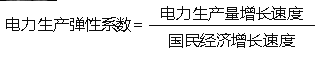
<style>
.page{position:relative;width:323px;height:57px;background:#ffffff}
.page>*{position:absolute;margin:0}
.t1{font:16px "MicrosoftYaHei";letter-spacing:-0.005em;color:#0d0d0d}
</style>
<div class="page">
<p class="t1" style="left:161px;top:6px;width:142px;height:15px">电力生产量增长速度</p>
<p class="t1" style="left:6px;top:17px;width:136px;height:15px">电力生产弹性系数=</p>
<p class="t1" style="left:169px;top:33px;width:126px;height:15px">国民经济增长速度</p>
</div>
